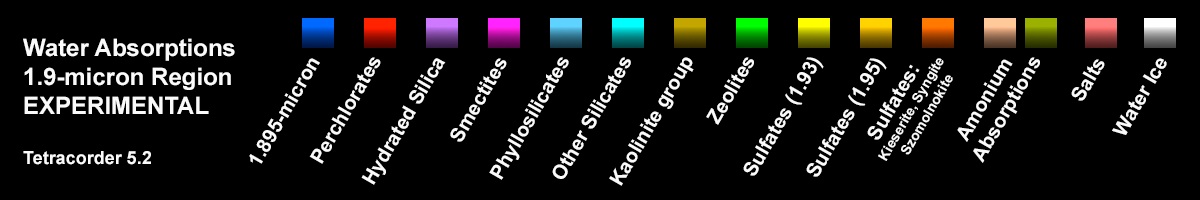
<style>
.page{position:relative;width:1200px;height:200px;background:#000000}
.page>*{position:absolute;margin:0}
.t1{font:24px "Arial-BoldMT";color:#f9faf9}
.t2{font:18px "Arial-BoldMT";color:#f9faf9}
.t3{font:20px "Arial-BoldMT";color:#f9faf9}
.t4{font:14px "Arial-BoldMT";color:#f9faf9}
</style>
<div class="page">
<p class="t1" style="left:23px;top:38px;width:212px;height:127px">Water Absorptions<br>1.9-micron Region<br>EXPERIMENTAL<br><br><span class="t2">Tetracorder 5.2</span></p>
<p class="t3" style="left:249px;top:58px;width:71px;height:106px;rotate:-60deg">1.895-micron</p>
<p class="t3" style="left:309px;top:57px;width:72px;height:107px;rotate:-60deg">Perchlorates</p>
<p class="t3" style="left:361px;top:58px;width:85px;height:127px;rotate:-60deg">Hydrated Silica</p>
<p class="t3" style="left:450px;top:58px;width:57px;height:84px;rotate:-60deg">Smectites</p>
<p class="t3" style="left:489px;top:57px;width:80px;height:123px;rotate:-60deg">Phyllosilicates</p>
<p class="t3" style="left:552px;top:57px;width:79px;height:122px;rotate:-60deg">Other Silicates</p>
<p class="t3" style="left:609px;top:57px;width:85px;height:129px;rotate:-60deg">Kaolinite group</p>
<p class="t3" style="left:706px;top:57px;width:48px;height:68px;rotate:-60deg">Zeolites</p>
<p class="t3" style="left:743px;top:57px;width:81px;height:119px;rotate:-60deg">Sulfates (1.93)</p>
<p class="t3" style="left:806px;top:58px;width:81px;height:119px;rotate:-60deg">Sulfates (1.95)</p>
<p class="t4" style="left:867px;top:58px;width:86px;height:103px;rotate:-60deg"><span class="t1">  </span><span class="t3">Sulfates:<br></span>Kieserite, Syngite<br>    Szomolnokite</p>
<p class="t3" style="left:957px;top:57px;width:83px;height:106px;rotate:-60deg"><span class="t2"> </span> Amonium<br>Absorptions</p>
<p class="t3" style="left:1071px;top:59px;width:34px;height:42px;rotate:-60deg">Salts</p>
<p class="t3" style="left:1112px;top:58px;width:55px;height:77px;rotate:-60deg">Water Ice</p>
</div>
